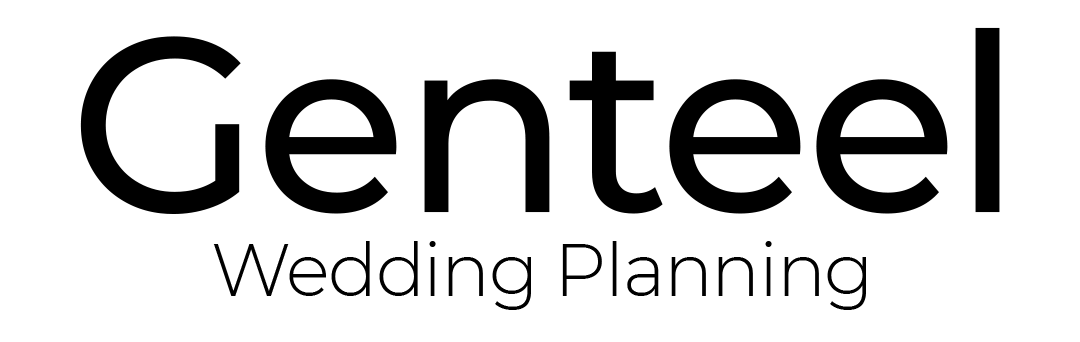
<style>
.page{position:relative;width:1080px;height:342px;background:#ffffff}
.page>*{position:absolute;margin:0}
.t1{font:248px "Montserrat-Medium";letter-spacing:-0.02em;color:#000000}
.t2{font:73px "Montserrat-Light";letter-spacing:-0.02em;color:#000000}
</style>
<div class="page">
<p class="t1" style="left:80px;top:27px;width:920px;height:187px">Genteel</p>
<p class="t2" style="left:213px;top:241px;width:653px;height:69px">Wedding Planning</p>
</div>
